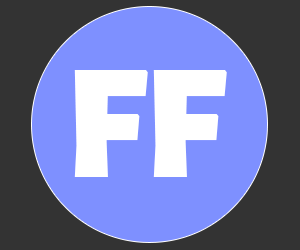
<style>
.page{position:relative;width:300px;height:250px;background:#7e90ff}
.page>*{position:absolute;margin:0}
.t1{font:164.4px "AlegreyaSans-Black";color:#ffffff}
</style>
<div class="page">
<p class="t1" style="left:74px;top:70px;width:153px;height:107px">FF</p>
</div>
